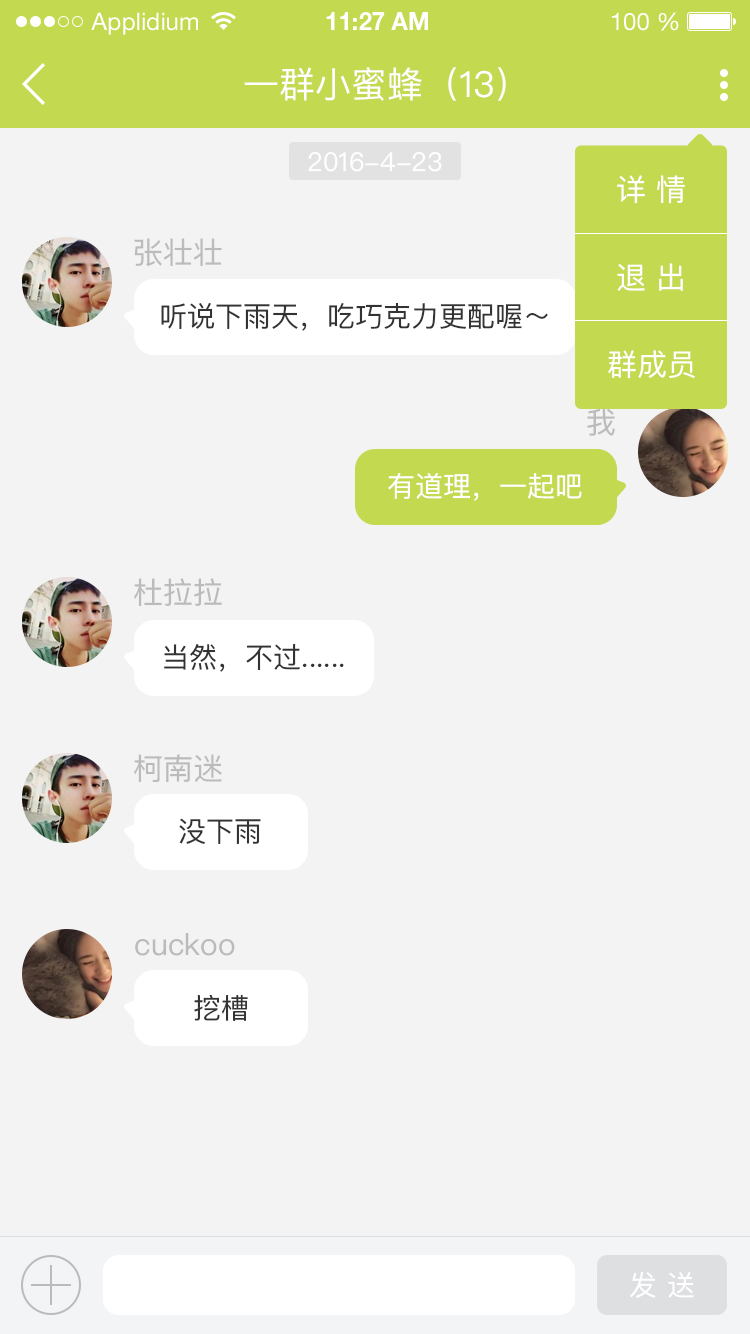
<style>
.page{position:relative;width:750px;height:1334px;background:#f3f3f3}
.page>*{position:absolute;margin:0}
.t1{font:24px "HelveticaNeueLTStd-Roman";color:#ffffff}
.t2{font:24px "HelveticaNeueLTStd-Bd";color:#ffffff}
.t3{font:36px "PingFangSC-Regular";color:#ffffff}
.t4{font:26px "PingFangSC-Regular";color:#ffffff}
.t5{font:30px "PingFangSC-Regular";color:#ffffff}
.t6{font:30px "PingFangSC-Regular";color:#bbbbbb}
.t7{font:28px "PingFangSC-Regular";color:#333333}
.t8{font:28px "PingFangSC-Regular";color:#ffffff}
</style>
<div class="page">
<p class="t1" style="left:91px;top:12px;width:107px;height:23px">Applidium</p>
<p class="t2" style="left:326px;top:12px;width:102px;height:18px">11:27 AM</p>
<p class="t1" style="left:612px;top:12px;width:67px;height:19px">100 %</p>
<p class="t3" style="left:244px;top:67px;width:262px;height:34px">一群小蜜蜂（13）</p>
<p class="t4" style="left:308px;top:152px;width:134px;height:20px">2016-4-23</p>
<p class="t5" style="left:617px;top:175px;width:68px;height:29px">详 情</p>
<p class="t6" style="left:134px;top:238px;width:88px;height:28px">张壮壮</p>
<p class="t5" style="left:617px;top:263px;width:66px;height:28px">退 出</p>
<p class="t7" style="left:161px;top:302px;width:387px;height:29px">听说下雨天，吃巧克力更配喔～</p>
<p class="t5" style="left:608px;top:350px;width:87px;height:29px">群成员</p>
<p class="t6" style="left:587px;top:408px;width:28px;height:28px">我</p>
<p class="t8" style="left:388px;top:473px;width:194px;height:28px">有道理，一起吧</p>
<p class="t6" style="left:134px;top:578px;width:88px;height:28px">杜拉拉</p>
<p class="t7" style="left:164px;top:644px;width:180px;height:28px">当然，不过......</p>
<p class="t6" style="left:134px;top:754px;width:88px;height:29px">柯南迷</p>
<p class="t7" style="left:179px;top:818px;width:82px;height:26px">没下雨</p>
<p class="t6" style="left:135px;top:933px;width:100px;height:23px">cuckoo</p>
<p class="t7" style="left:194px;top:995px;width:54px;height:26px">挖槽</p>
<p class="t8" style="left:630px;top:1271px;width:64px;height:27px">发 送</p>
</div>
